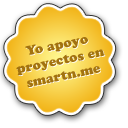
<style>
.page{position:relative;width:128px;height:128px;background:#ffffff}
.page>*{position:absolute;margin:0}
.t1{font:13px "CooperBlackStd";color:#a3730f}
.t2{font:13px "CooperBlackStd"}
</style>
<div class="page">
<p class="t1" style="left:16px;top:37px;width:89px;height:51px;text-align:center;rotate:-12deg">Yo apoyo<br>proyectos en<br>smartn.me</p>
<p class="t2" style="left:17px;top:37px;width:89px;height:51px;text-align:center;rotate:-12deg">Yo apoyo<br>proyectos en<br>smartn.me</p>
</div>
